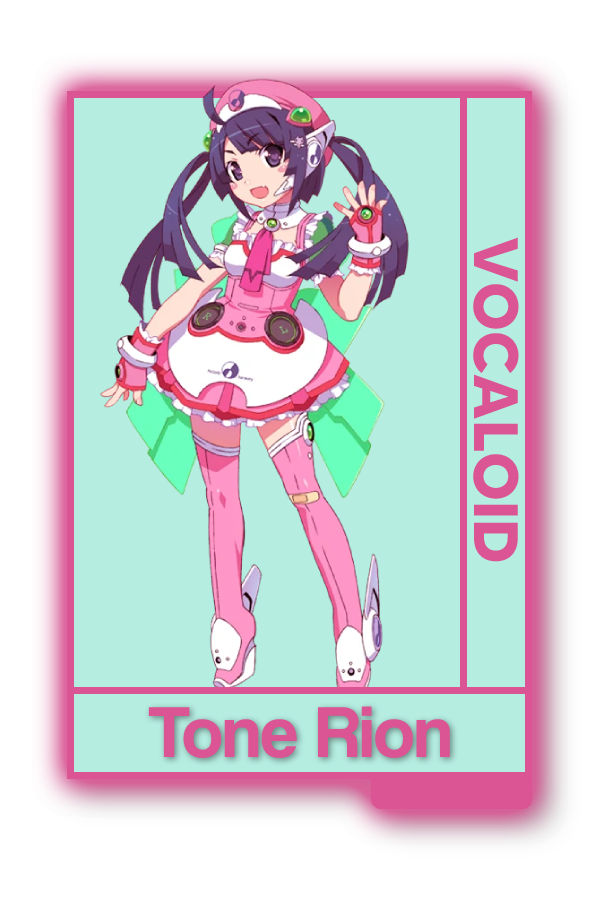
<style>
.page{position:relative;width:600px;height:900px;background:#b5ede1}
.page>*{position:absolute;margin:0}
.t1{font:62.5px "MADETOMMY-Bold";color:#db5493}
.t2{font:75px "CoolveticaRg-Regular";color:#db5493}
</style>
<div class="page">
<p class="t1" style="left:473px;top:237px;width:46px;height:325px;rotate:90deg">VOCALOID</p>
<p class="t2" style="left:148px;top:706px;width:302px;height:52px">Tone Rion</p>
</div>
